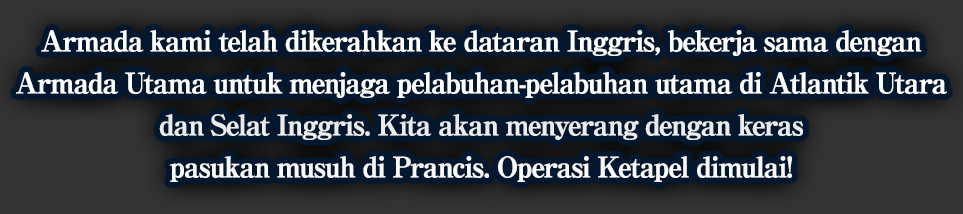
<style>
.page{position:relative;width:963px;height:214px;background:#03172f}
.page>*{position:absolute;margin:0}
.t1{font:28px/42px "RyuminPro-ExBold";letter-spacing:-0.08em;color:#ffffff;font-weight:bold}
</style>
<div class="page">
<p class="t1" style="left:16px;top:30px;width:931px;height:152px;text-align:center">Armada kami telah dikerahkan ke dataran Inggris, bekerja sama dengan<br>Armada Utama untuk menjaga pelabuhan-pelabuhan utama di Atlantik Utara<br>dan Selat Inggris. Kita akan menyerang dengan keras<br>pasukan musuh di Prancis. Operasi Ketapel dimulai!</p>
</div>
